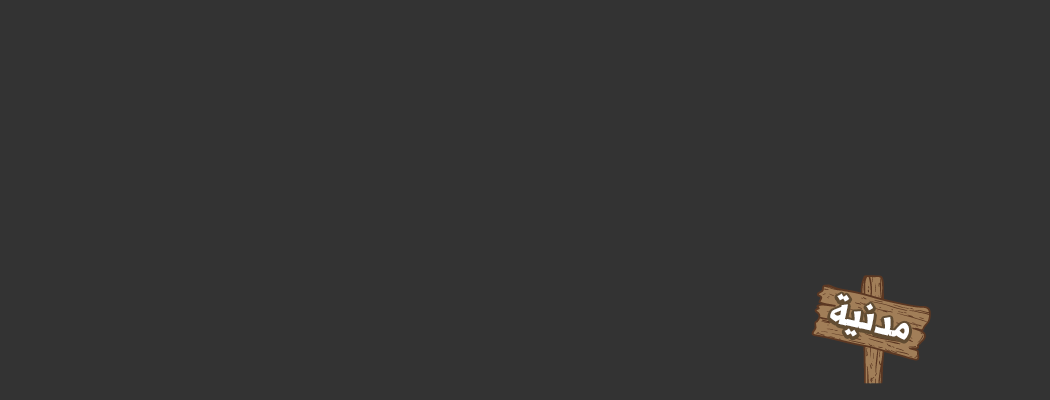
<style>
.page{position:relative;width:1050px;height:400px;background:#333333}
.page>*{position:absolute;margin:0}
.t1{font:48px "Shorooq_N1";color:#ffffff}
</style>
<div class="page">
<p class="t1" style="left:830px;top:293px;width:79px;height:47px;rotate:13deg">مدنية</p>
</div>
